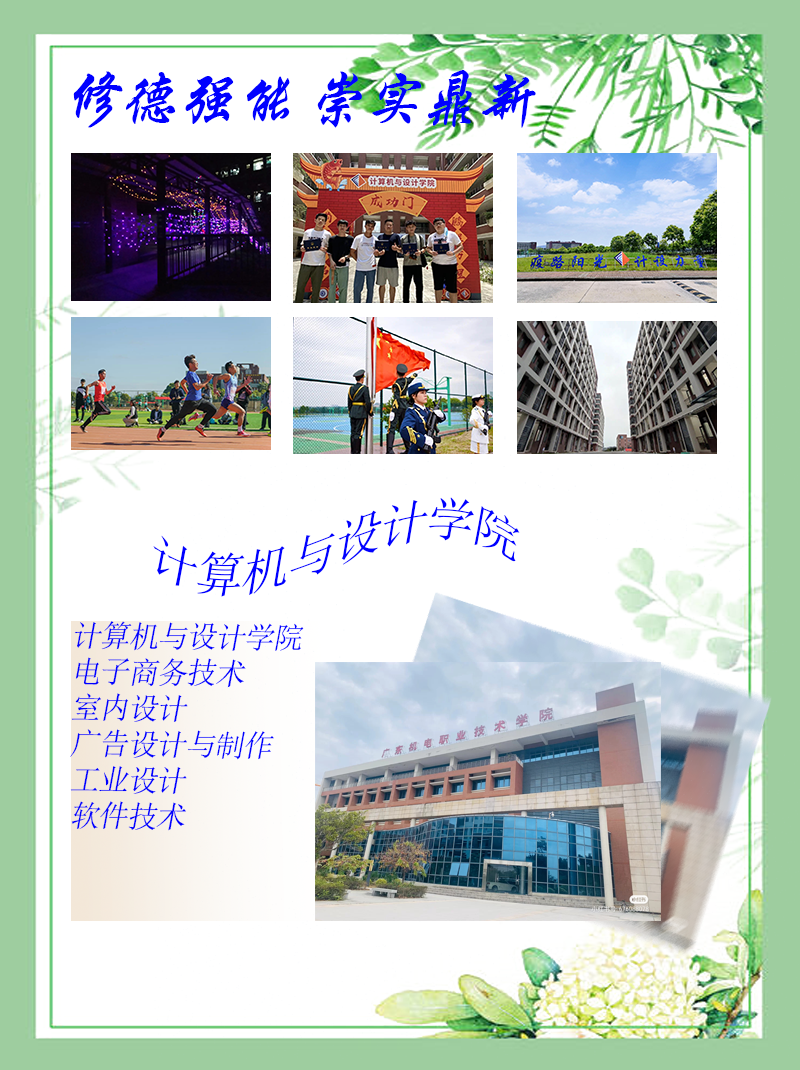
<style>
.page{position:relative;width:800px;height:1070px;background:#ffffff}
.page>*{position:absolute;margin:0}
.t1{font:60.6px "STXingkai";letter-spacing:-0.04em;color:#0000ff;font-style:italic}
.t2{font:48.5px "NSimSun";letter-spacing:-0.04em;color:#0000ff;font-style:italic}
.t3{font:30.3px "NSimSun";letter-spacing:-0.04em;color:#0000ff;font-style:italic}
</style>
<div class="page">
<p class="t1" style="left:73px;top:70px;width:463px;height:58px">修德强能 崇实鼎新</p>
<p class="t2" style="left:153px;top:497px;width:367px;height:100px">计算机与设计学院</p>
<p class="t3" style="left:70px;top:621px;width:234px;height:210px;rotate:1deg">计算机与设计学院<br>电子商务技术<br>室内设计<br>广告设计与制作<br>工业设计<br>软件技术</p>
</div>
